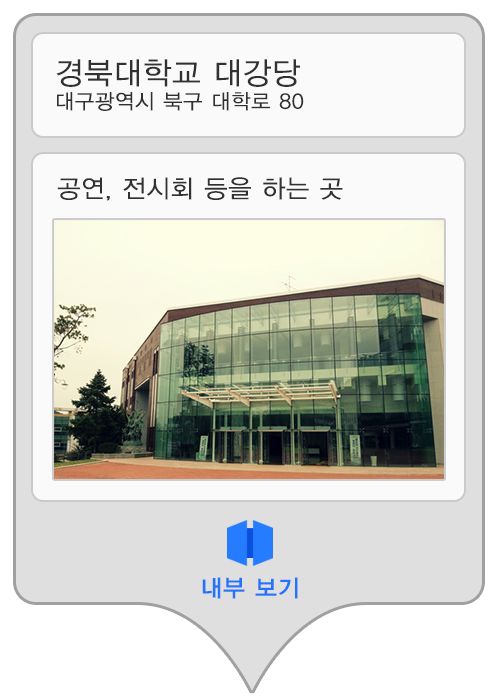
<style>
.page{position:relative;width:500px;height:700px;background:#fafafa}
.page>*{position:absolute;margin:0}
.t1{font:20.8px/33.3px "YDIYGO320";letter-spacing:0.04em;color:#313131}
.t2{font:30.6px/33.3px "YDIYGO320";letter-spacing:0.04em;color:#313131}
.t3{font:25px "YDIYGO320";letter-spacing:0.04em;color:#313131}
.t4{font:23.6px "YDIYGO330";letter-spacing:0.04em;color:#2374fa}
</style>
<div class="page">
<p class="t1" style="left:56px;top:59px;width:248px;height:52px"><span class="t2">경북대학교 대강당<br></span>대구광역시 북구 대학로 80</p>
<p class="t3" style="left:57px;top:177px;width:286px;height:24px">공연, 전시회 등을 하는 곳</p>
<p class="t4" style="left:202px;top:577px;width:96px;height:22px">내부 보기</p>
</div>
